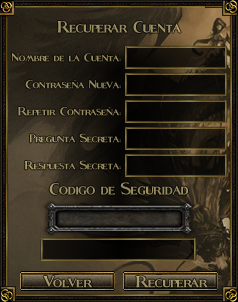
<style>
.page{position:relative;width:238px;height:302px}
.page>*{position:absolute;margin:0}
.t1{font:31px "Fleet-Street";color:#9c8f62;scale:0.94 1}
.t2{font:21.5px "Fleet-Street";color:#998d61}
.t3{font:22px "Fleet-Street";color:#998c61}
.t4{font:22px "Fleet-Street";color:#9d9063}
.t5{font:22px "Fleet-Street";color:#a09264}
.t6{font:22px "Fleet-Street";color:#9f9265}
.t7{font:31px "Fleet-Street";color:#9a8d61;scale:0.94 1}
.t8{font:30px "Fleet-Street";color:#a29466}
</style>
<div class="page">
<p class="t1" style="left:57px;top:21px;width:124px;height:12px">Recuperar Cuenta</p>
<p class="t2" style="left:11px;top:53px;width:110px;height:9px">Nombre de la Cuenta:</p>
<p class="t3" style="left:25px;top:80px;width:96px;height:9px">Contraseña Nueva:</p>
<p class="t4" style="left:18px;top:107px;width:103px;height:9px">Repetir Contraseña:</p>
<p class="t5" style="left:29px;top:133px;width:92px;height:10px">Pregunta Secreta:</p>
<p class="t6" style="left:24px;top:160px;width:97px;height:10px">Respuesta Secreta:</p>
<p class="t7" style="left:49px;top:182px;width:139px;height:13px">Codigo de Seguridad</p>
<p class="t8" style="left:43px;top:276px;width:50px;height:12px">Volver</p>
<p class="t8" style="left:136px;top:276px;width:72px;height:12px">Recuperar</p>
</div>
